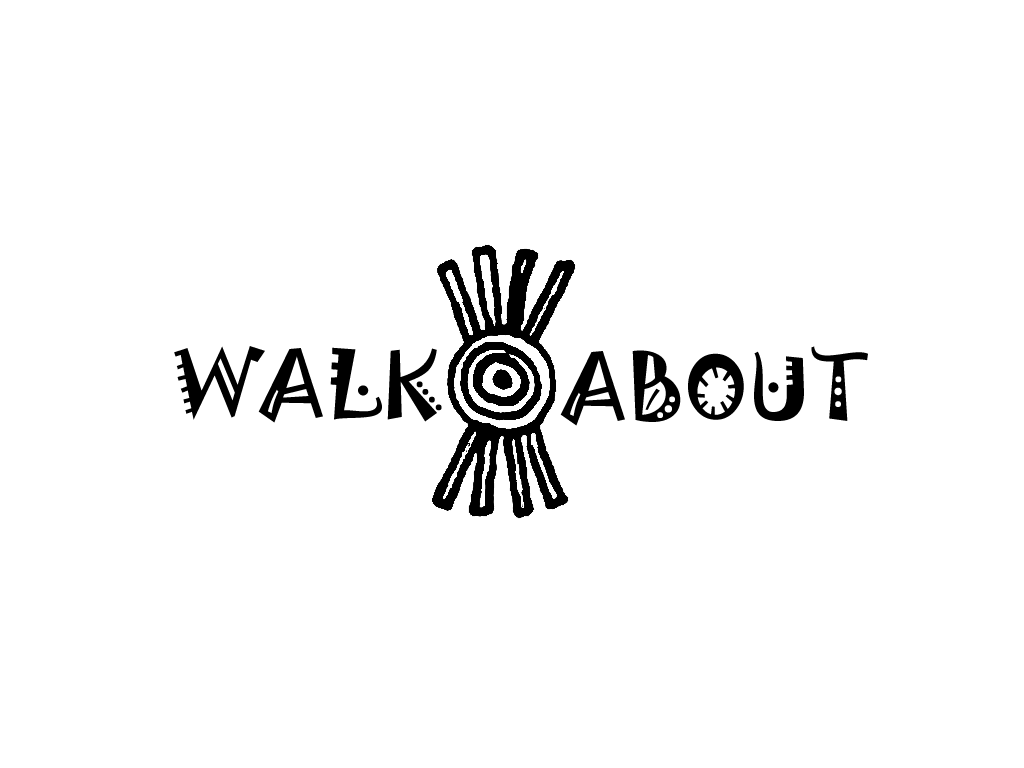
<style>
.page{position:relative;width:1024px;height:768px;background:#ffffff}
.page>*{position:absolute;margin:0}
.t1{font:83.3px "Jokerman-Regular";color:#000000}
</style>
<div class="page">
<p class="t1" style="left:174px;top:346px;width:268px;height:77px">WALK</p>
<p class="t1" style="left:560px;top:346px;width:308px;height:80px">ABOUT</p>
</div>
